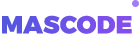
<style>
.page{position:relative;width:139px;height:35px;background:#ffffff}
.page>*{position:absolute;margin:0}
.t1{font:25px "Montserrat-Black";color:#6c52e7}
</style>
<div class="page">
<p class="t1" style="left:2px;top:15px;width:130px;height:19px">MASCODE</p>
</div>
